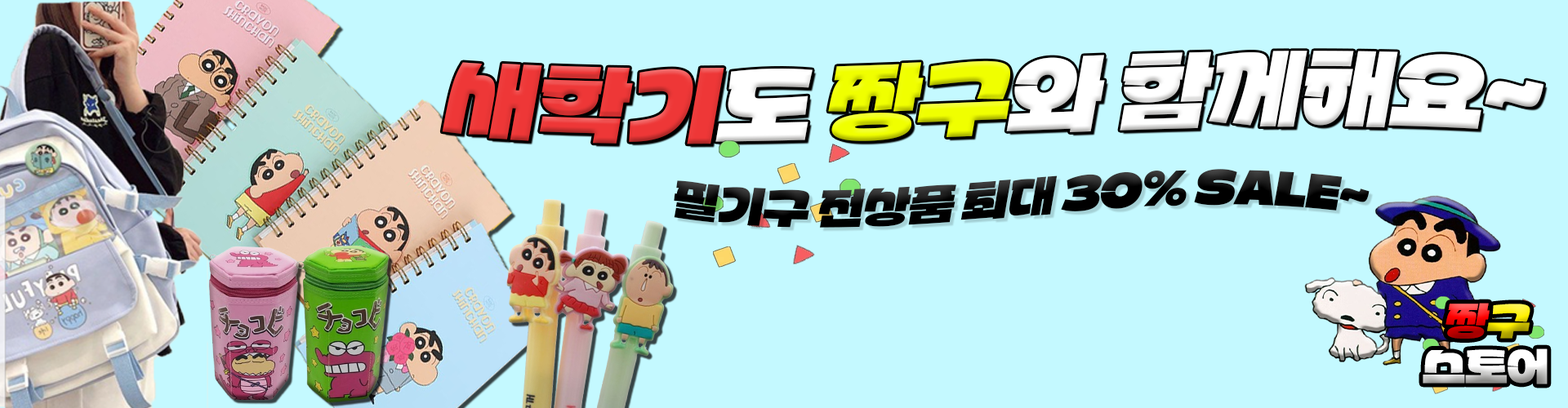
<style>
.page{position:relative;width:1568px;height:408px;background:#c4f9ff}
.page>*{position:absolute;margin:0}
.t1{font:81.7px "Partial-Sans-KR";color:#ffffff;font-style:italic}
.t2{font:81.7px "Partial-Sans-KR";color:#ee3737;font-style:italic}
.t3{font:81.7px "Partial-Sans-KR";color:#f0ff00;font-style:italic}
.t4{font:40.8px "Partial-Sans-KR";color:#000000;font-style:italic}
.t5{font:37.7px/45.3px "Partial-Sans-KR"}
.t6{font:37.7px/45.3px "Partial-Sans-KR";font-style:italic}
</style>
<div class="page">
<p class="t1" style="left:442px;top:51px;width:1102px;height:94px"><span class="t2">새학기</span>도<span class="t3"> 짱구</span>와 함께해요~</p>
<p class="t4" style="left:674px;top:169px;width:696px;height:59px">필기구 전상품 최대 30% SALE~</p>
<p class="t5" style="left:1423px;top:303px;width:125px;height:82px;text-align:center"><span class="t6">짱</span><span class="t6">구<br></span>스토어</p>
</div>
